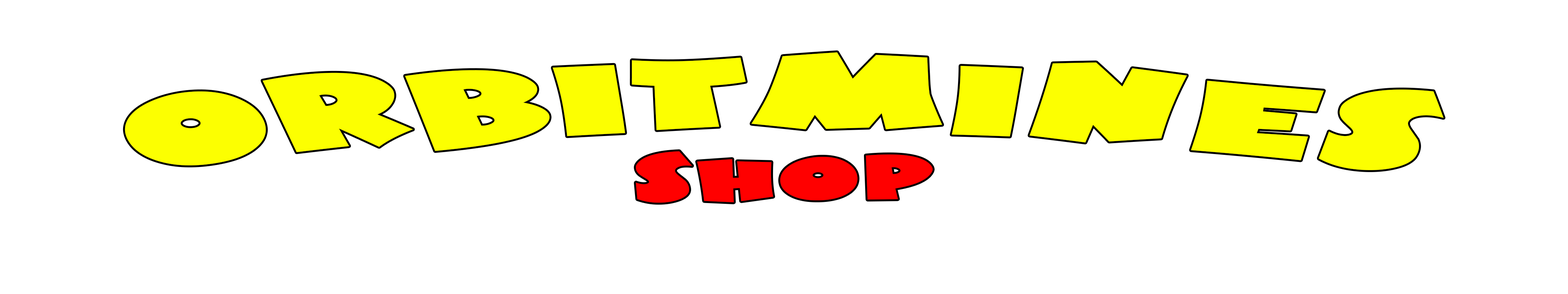
<style>
.page{position:relative;width:1568px;height:294px;background:#ffffff}
.page>*{position:absolute;margin:0}
.t1{font:98px "HotMustardBTN";color:#fcff01;scale:2 1}
.t2{font:58.8px "HotMustardBTN";color:#ff0000;scale:2 1}
</style>
<div class="page">
<p class="t1" style="left:125px;top:52px;width:1319px;height:118px">OrbitMines</p>
<p class="t2" style="left:636px;top:151px;width:297px;height:52px">Shop</p>
</div>
